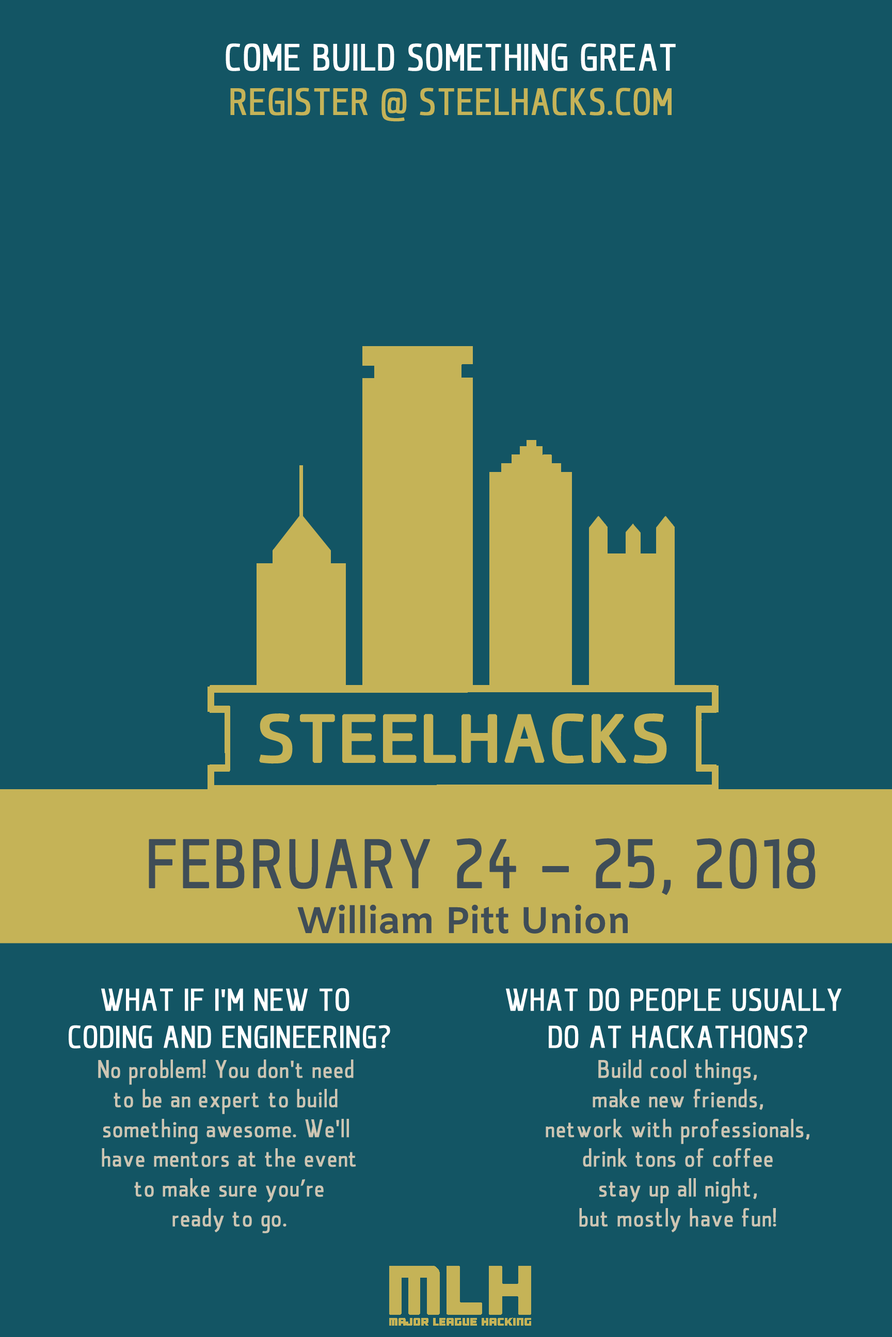
<style>
.page{position:relative;width:892px;height:1337px;background:#135564}
.page>*{position:absolute;margin:0}
.t1{font:37.2px "qontra-Regular";color:#ffffff;font-weight:bold}
.t2{font:37.2px "qontra-Regular";color:#c5b358;font-weight:bold}
.t3{font:67.8px "qontra-Regular";color:#3f4d57;font-weight:bold}
.t4{font:37.2px "Amiko-Bold";color:#3f4d57;font-weight:bold}
.t5{font:24.8px "qontra-Regular";color:#cdc5b3;font-weight:bold}
.t6{font:31px "qontra-Regular";color:#ffffff;font-weight:bold}
.t7{font:31px "MyriadPro-Regular";color:#ffffff;font-weight:bold}
.t8{font:24.8px "MyriadPro-Regular";color:#cdc5b3;font-weight:bold}
</style>
<div class="page">
<p class="t1" style="left:225px;top:43px;width:450px;height:79px;text-align:center">COME BUILD SOMETHING GREAT<br><span class="t2">REGISTER @ STEELHACKS.COM</span></p>
<p class="t3" style="left:149px;top:838px;width:666px;height:58px">FEBRUARY 24 - 25, 2018</p>
<p class="t4" style="left:297px;top:905px;width:330px;height:29px">William Pitt Union</p>
<p class="t5" style="left:69px;top:988px;width:321px;height:246px;text-align:center"><span class="t6">WHAT IF I</span><span class="t7">'</span><span class="t6">M NEW TO <br>CODING AND ENGINEERING?<br></span>No problem! You don<span class="t8">'</span>t need <br>to be an expert to build <br>something awesome. We<span class="t8">'</span>ll <br>have mentors at the event<br> to make sure you<span class="t8">’</span>re <br>ready to go.</p>
<p class="t5" style="left:506px;top:988px;width:335px;height:245px;text-align:center"><span class="t6">WHAT DO PEOPLE USUALLY <br>DO AT HACKATHONS?<br></span>Build cool things,<br>make new friends,<br>network with professionals,<br>drink tons of coffee<br>stay up all night,<br>but mostly have fun!</p>
</div>
